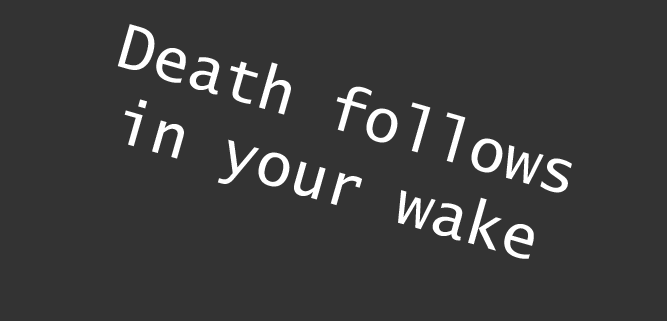
<style>
.page{position:relative;width:667px;height:321px;background:#333333}
.page>*{position:absolute;margin:0}
.t1{font:60.6px "LucidaSans-Typewriter";color:#ffffff}
</style>
<div class="page">
<p class="t1" style="left:117px;top:24px;width:455px;height:235px;text-align:center;rotate:16deg">Death follows<br>in your wake</p>
</div>
